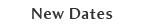
<style>
.page{position:relative;width:144px;height:28px;background:#ffffff}
.page>*{position:absolute;margin:0}
.t1{font:16px "AmiraParadiso";letter-spacing:0.05em;color:#333333}
</style>
<div class="page">
<p class="t1" style="left:32px;top:8px;width:81px;height:11px">New Dates</p>
</div>
